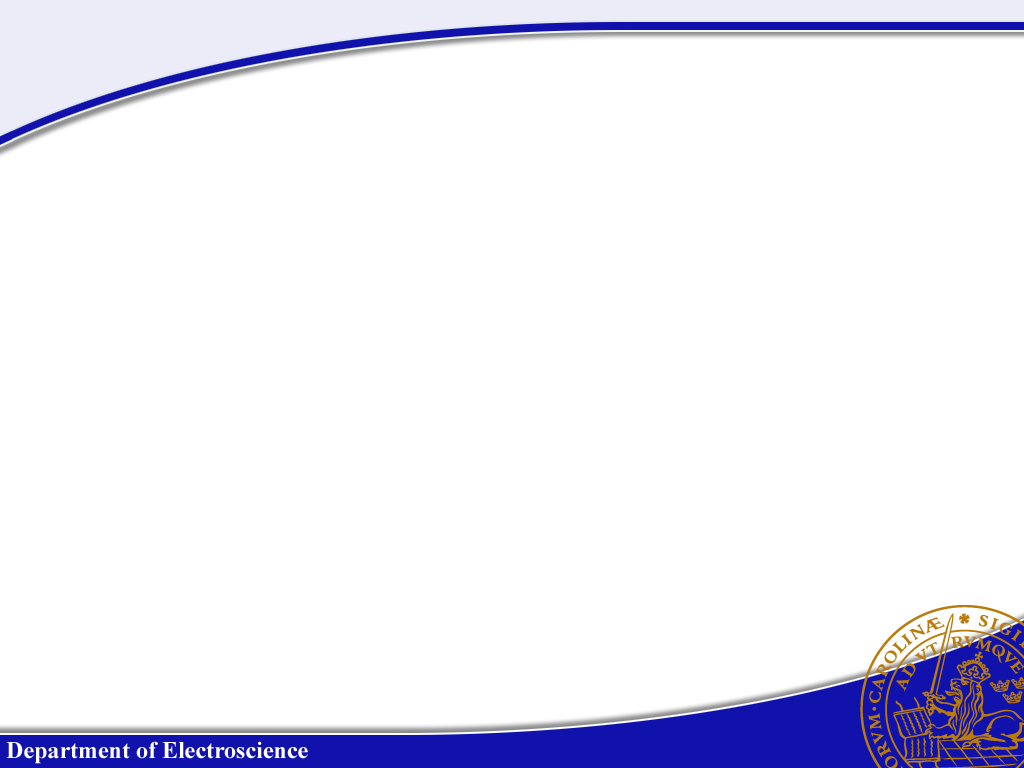
<style>
.page{position:relative;width:1024px;height:768px;background:#ffffff}
.page>*{position:absolute;margin:0}
.t1{font:24px "TimesNewRomanPS-BoldMT";color:#ffffff}
</style>
<div class="page">
<p class="t1" style="left:6px;top:741px;width:302px;height:23px">Department of Electroscience</p>
</div>
